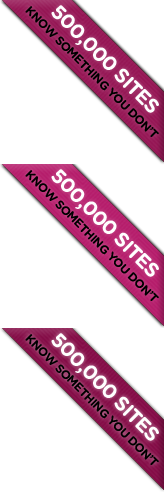
<style>
.page{position:relative;width:164px;height:492px;background:#ffffff}
.page>*{position:absolute;margin:0}
.t1{font:12px/16px "GothamRounded-Bold";letter-spacing:-0.05em;color:#000000}
.t2{font:20px/16px "GothamRounded-Bold";letter-spacing:-0.05em;color:#ffffff}
</style>
<div class="page">
<p class="t1" style="left:25px;top:169px;width:134px;height:132px;text-align:center;rotate:45deg"><span class="t2">500,000 SITES<br></span>KNOW SOMETHING YOU DON’T</p>
</div>
